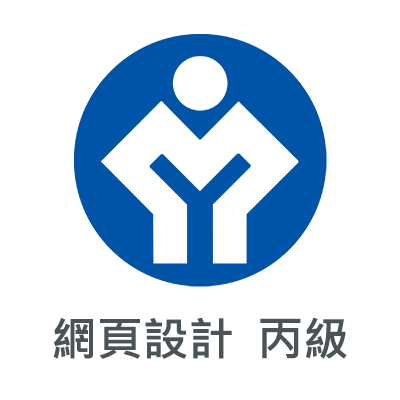
<style>
.page{position:relative;width:400px;height:400px;background:#ffffff}
.page>*{position:absolute;margin:0}
.t1{font:45.8px "MicrosoftJhengHeiBold";color:#4b5357}
</style>
<div class="page">
<p class="t1" style="left:53px;top:317px;width:294px;height:42px">網頁設計  丙級</p>
</div>
